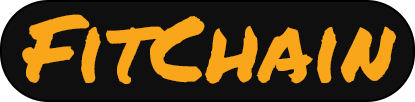
<style>
.page{position:relative;width:415px;height:102px;background:#0f0f10}
.page>*{position:absolute;margin:0}
.t1{font:91.7px "PermanentMarker-Regular";color:#faa61b}
</style>
<div class="page">
<p class="t1" style="left:22px;top:14px;width:374px;height:70px">FitChain</p>
</div>
